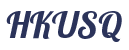
<style>
.page{position:relative;width:129px;height:50px;background:#ffffff}
.page>*{position:absolute;margin:0}
.t1{font:36px "Lobster1.4";color:#2b335a}
</style>
<div class="page">
<p class="t1" style="left:6px;top:11px;width:116px;height:31px">HKUSQ</p>
</div>
